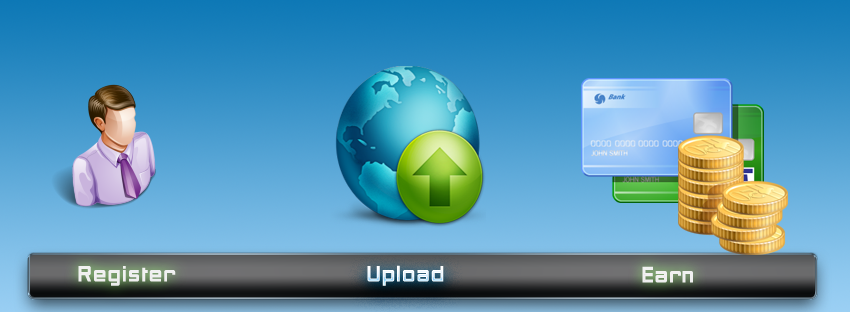
<style>
.page{position:relative;width:850px;height:312px}
.page>*{position:absolute;margin:0}
.t1{font:21px "PFStudioHeavy-Regular";color:#f1f1f1}
.t2{font:21px "PFStudioHeavy-Regular";color:#ecf7ff}
</style>
<div class="page">
<p class="t1" style="left:78px;top:266px;width:98px;height:20px">Register</p>
<p class="t2" style="left:367px;top:265px;width:77px;height:21px">Upload</p>
<p class="t1" style="left:642px;top:266px;width:51px;height:17px">Earn</p>
</div>
